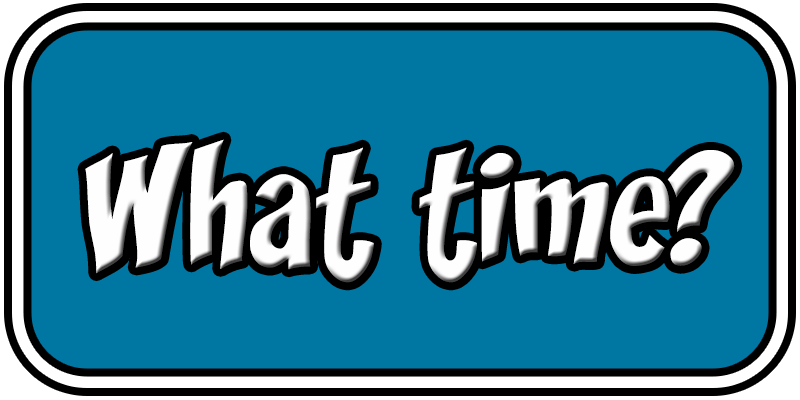
<style>
.page{position:relative;width:800px;height:400px;background:#0076a3}
.page>*{position:absolute;margin:0}
.t1{font:146.7px "Yikes";color:#fefefe}
</style>
<div class="page">
<p class="t1" style="left:85px;top:139px;width:650px;height:144px">What time?</p>
</div>
